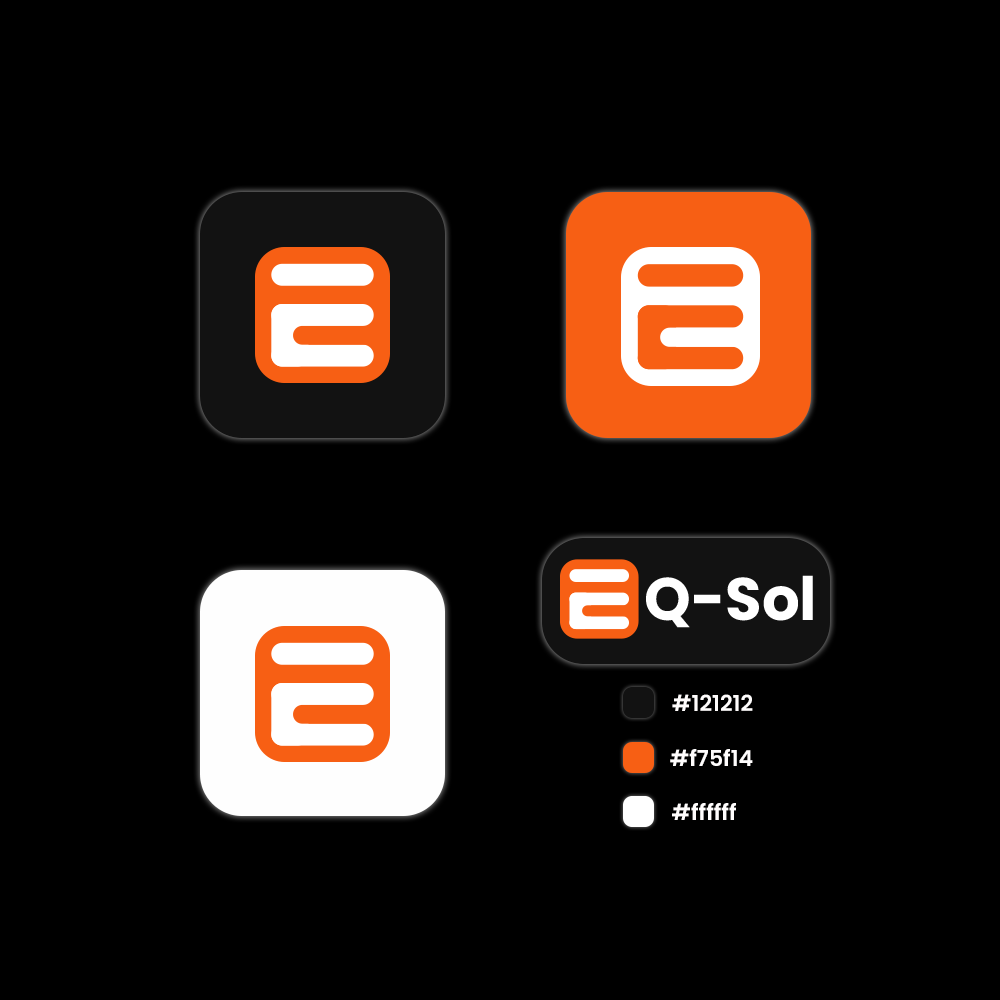
<style>
.page{position:relative;width:1000px;height:1000px;background:#000000}
.page>*{position:absolute;margin:0}
.t1{font:22px "Poppins-SemiBold";color:#fffdfd}
</style>
<div class="page">
<p class="t1" style="left:672px;top:694px;width:81px;height:17px">#121212</p>
<p class="t1" style="left:670px;top:749px;width:83px;height:17px">#f75f14</p>
<p class="t1" style="left:672px;top:803px;width:64px;height:17px">#ffffff</p>
</div>
